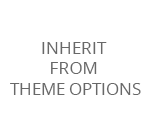
<style>
.page{position:relative;width:150px;height:130px;background:#ffffff}
.page>*{position:absolute;margin:0}
.t1{font:17px "OpenSans";color:#686868;text-transform:uppercase}
</style>
<div class="page">
<p class="t1" style="left:10px;top:42px;width:131px;height:53px;text-align:center">Inherit <br>from <br>THeme Options</p>
</div>
